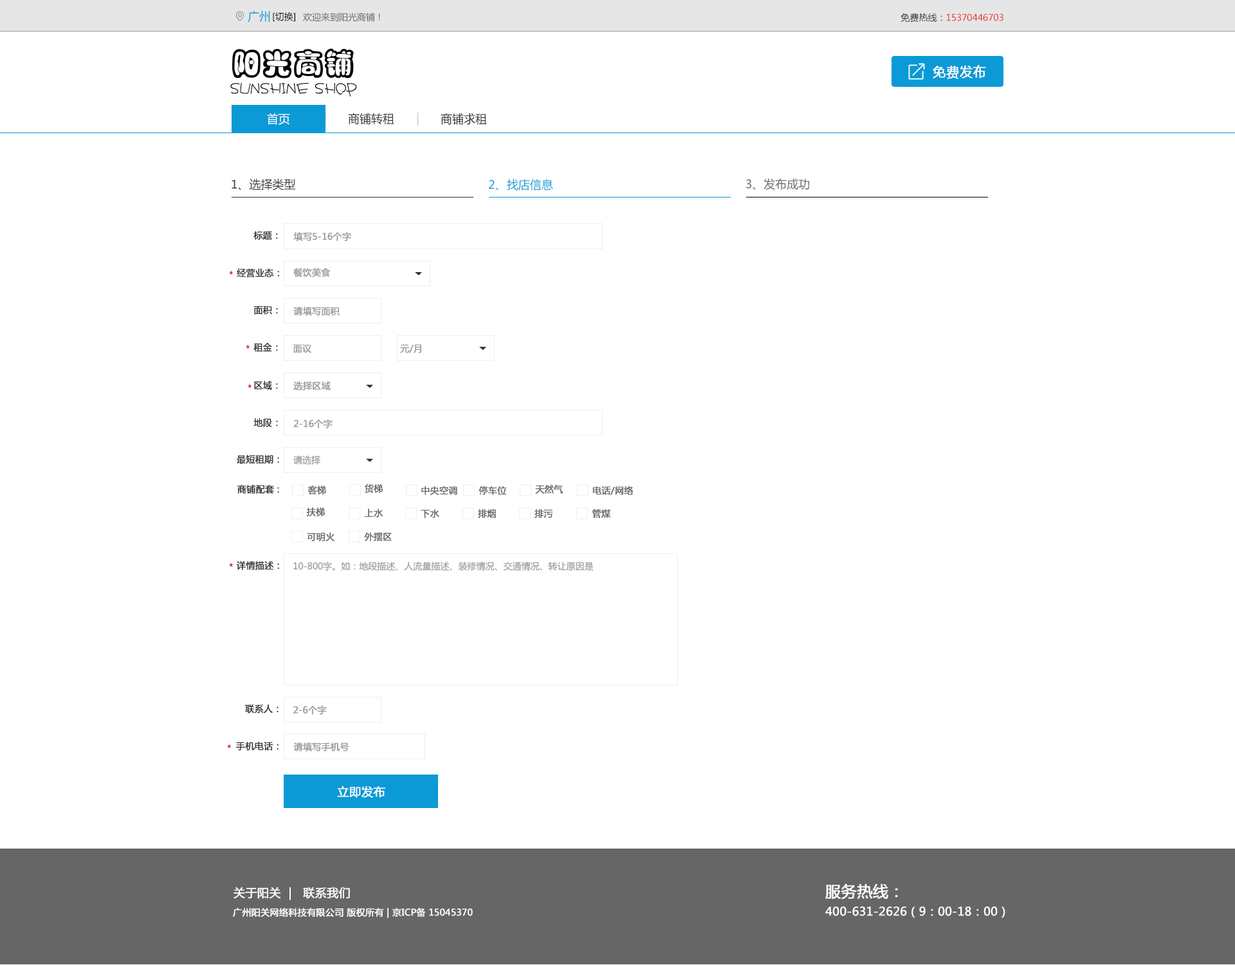
<style>
.page{position:relative;width:1235px;height:965px;background:#ffffff}
.page>*{position:absolute;margin:0}
.t1{font:11.6px "MicrosoftYaHei";color:#0b9ad6}
.t2{font:9px "MicrosoftYaHei";color:#000000}
.t3{font:9px "MicrosoftYaHei";color:#666666}
.t4{font:9px "MicrosoftYaHei";color:#e22222}
.t5{font:9px "MicrosoftYaHei";color:#333333}
.t6{font:13.2px "MicrosoftYaHei";color:#ffffff;text-transform:uppercase;font-weight:bold}
.t7{font:11.6px "MicrosoftYaHei";color:#ffffff}
.t8{font:11.8px "MicrosoftYaHei";color:#0b9ad6}
.t9{font:11.8px "MicrosoftYaHei";color:#333232}
.t10{font:11.8px "MicrosoftYaHei";color:#ccc8c8}
.t11{font:11.6px "MicrosoftYaHei";color:#333333}
.t12{font:11.6px "MicrosoftYaHei";color:#666666}
.t13{font:9px "MicrosoftYaHei";color:#333333;text-transform:uppercase;font-weight:bold}
.t14{font:9px "MicrosoftYaHei";color:#999999;text-transform:uppercase;font-weight:bold}
.t15{font:9px "MicrosoftYaHei";color:#e22222;text-transform:uppercase;font-weight:bold}
.t16{font:9px "MicrosoftYaHei";color:#999999}
.t17{font:9px "MicrosoftYaHei";color:#666666;text-transform:uppercase;font-weight:bold}
.t18{font:11.6px "MicrosoftYaHei";color:#ffffff;text-transform:uppercase;font-weight:bold}
.t19{font:11.6px "MicrosoftYaHei";color:#fefefe;text-transform:uppercase;font-weight:bold}
.t20{font:15.4px "MicrosoftYaHei";color:#ffffff;text-transform:uppercase;font-weight:bold}
.t21{font:9px "MicrosoftYaHei";color:#ffffff;text-transform:uppercase;font-weight:bold}
</style>
<div class="page">
<p class="t1" style="left:248px;top:10px;width:22px;height:13px">广州</p>
<p class="t2" style="left:273px;top:12px;width:22px;height:10px">[切换]</p>
<p class="t3" style="left:303px;top:12px;width:77px;height:10px">欢迎来到阳光商铺！</p>
<p class="t4" style="left:901px;top:13px;width:103px;height:10px"><span class="t5">免费热线：</span>15370446703</p>
<p class="t6" style="left:933px;top:65px;width:53px;height:14px">免费发布</p>
<p class="t7" style="left:267px;top:113px;width:23px;height:12px">首页</p>
<p class="t1" style="left:324px;top:112px;width:2px;height:13px">|</p>
<p class="t8" style="left:324px;top:112px;width:2px;height:13px">|</p>
<p class="t9" style="left:348px;top:113px;width:46px;height:12px">商铺转租</p>
<p class="t10" style="left:417px;top:113px;width:2px;height:12px">|</p>
<p class="t9" style="left:441px;top:113px;width:46px;height:12px">商铺求租</p>
<p class="t11" style="left:232px;top:178px;width:64px;height:12px">1、选择类型</p>
<p class="t1" style="left:489px;top:179px;width:64px;height:11px">2、找店信息</p>
<p class="t12" style="left:746px;top:178px;width:63px;height:12px">3、发布成功</p>
<p class="t13" style="left:254px;top:231px;width:24px;height:9px">标题：</p>
<p class="t14" style="left:293px;top:232px;width:58px;height:9px">填写5-16个字</p>
<p class="t13" style="left:237px;top:268px;width:42px;height:10px">经营业态：</p>
<p class="t14" style="left:293px;top:268px;width:38px;height:9px">餐饮美食</p>
<p class="t15" style="left:229px;top:271px;width:4px;height:4px">*</p>
<p class="t13" style="left:254px;top:306px;width:24px;height:9px">面积：</p>
<p class="t14" style="left:293px;top:306px;width:47px;height:10px">请填写面积</p>
<p class="t15" style="left:246px;top:345px;width:4px;height:4px">*</p>
<p class="t13" style="left:254px;top:343px;width:24px;height:9px">租金：</p>
<p class="t14" style="left:293px;top:344px;width:19px;height:9px">面议</p>
<p class="t14" style="left:400px;top:344px;width:21px;height:9px">元/月</p>
<p class="t15" style="left:248px;top:384px;width:4px;height:4px">*</p>
<p class="t13" style="left:254px;top:381px;width:24px;height:9px">区域：</p>
<p class="t14" style="left:293px;top:381px;width:38px;height:10px">选择区域</p>
<p class="t13" style="left:254px;top:418px;width:24px;height:9px">地段：</p>
<p class="t14" style="left:293px;top:419px;width:40px;height:10px">2-16个字</p>
<p class="t13" style="left:237px;top:455px;width:42px;height:9px">最短租期：</p>
<p class="t16" style="left:293px;top:456px;width:27px;height:9px">请选择</p>
<p class="t13" style="left:237px;top:485px;width:42px;height:9px">商铺配套 :</p>
<p class="t17" style="left:308px;top:485px;width:18px;height:10px">客梯</p>
<p class="t17" style="left:365px;top:484px;width:18px;height:10px">货梯</p>
<p class="t17" style="left:421px;top:486px;width:36px;height:9px">中央空调</p>
<p class="t17" style="left:479px;top:486px;width:28px;height:9px">停车位</p>
<p class="t17" style="left:535px;top:485px;width:28px;height:9px">天然气</p>
<p class="t17" style="left:593px;top:486px;width:41px;height:9px">电话/网络</p>
<p class="t17" style="left:306px;top:508px;width:19px;height:9px">扶梯</p>
<p class="t17" style="left:364px;top:508px;width:20px;height:9px">上水</p>
<p class="t17" style="left:421px;top:509px;width:18px;height:9px">下水</p>
<p class="t17" style="left:478px;top:509px;width:18px;height:9px">排烟</p>
<p class="t17" style="left:535px;top:509px;width:18px;height:9px">排污</p>
<p class="t17" style="left:592px;top:509px;width:19px;height:9px">管煤</p>
<p class="t17" style="left:307px;top:532px;width:28px;height:10px">可明火</p>
<p class="t17" style="left:364px;top:532px;width:28px;height:10px">外摆区</p>
<p class="t15" style="left:229px;top:563px;width:4px;height:4px">*</p>
<p class="t13" style="left:237px;top:561px;width:42px;height:9px">详情描述：</p>
<p class="t16" style="left:293px;top:562px;width:301px;height:9px">10-800字。如：地段描述、人流量描述、装修情况、交通情况、转让原因是</p>
<p class="t13" style="left:245px;top:705px;width:34px;height:9px">联系人：</p>
<p class="t14" style="left:293px;top:705px;width:34px;height:10px">2-6个字</p>
<p class="t15" style="left:227px;top:744px;width:4px;height:4px">*</p>
<p class="t13" style="left:236px;top:742px;width:43px;height:9px">手机电话：</p>
<p class="t14" style="left:293px;top:743px;width:56px;height:9px">请填写手机号</p>
<p class="t18" style="left:337px;top:786px;width:48px;height:12px">立即发布</p>
<p class="t19" style="left:234px;top:887px;width:116px;height:13px">关于阳关  |   联系我们</p>
<p class="t20" style="left:826px;top:883px;width:72px;height:17px">服务热线：</p>
<p class="t21" style="left:233px;top:908px;width:240px;height:10px">广州阳关网络科技有限公司 版权所有 | 京ICP备 15045370</p>
<p class="t18" style="left:826px;top:907px;width:180px;height:11px">400-631-2626（9：00-18：00）</p>
</div>
